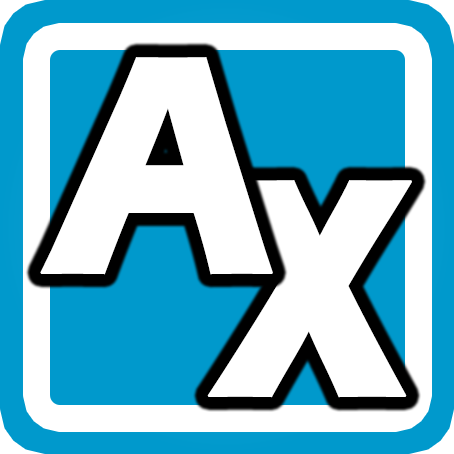
<style>
.page{position:relative;width:454px;height:454px;background:#ffffff}
.page>*{position:absolute;margin:0}
.t1{font:322.3px "ErasITC-Bold";color:#ffffff;font-weight:bold;scale:0.84 1}
</style>
<div class="page">
<p class="t1" style="left:40px;top:57px;width:233px;height:218px">A</p>
<p class="t1" style="left:207px;top:180px;width:205px;height:218px">X</p>
</div>
